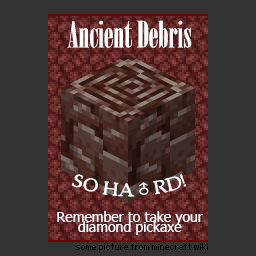
<style>
.page{position:relative;width:256px;height:256px;background:#333333}
.page>*{position:absolute;margin:0}
.t1{font:36px "Onyx";color:#fefefe}
.t2{font:18px "PalatinoLinotype-Roman";color:#fefefe}
.t3{font:18px "AdobeHeitiStd-Regular";color:#fefefe}
.t4{font:14px "Tahoma";color:#fefefe}
</style>
<div class="page">
<p class="t1" style="left:67px;top:20px;width:125px;height:28px">Ancient Debris</p>
<p class="t2" style="left:72px;top:173px;width:114px;height:24px">SO HA<span class="t3">♂</span>RD!</p>
<p class="t4" style="left:57px;top:211px;width:146px;height:24px;text-align:center">Remember to take your<br>diamond pickaxe</p>
</div>
